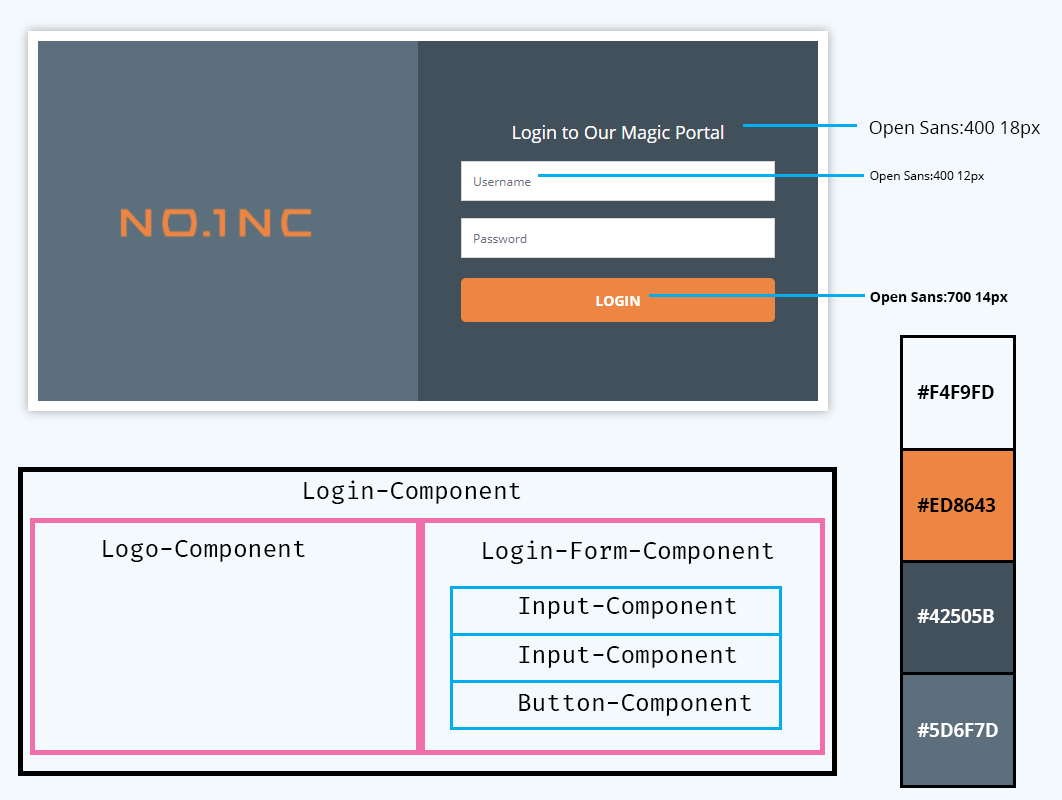
<style>
.page{position:relative;width:1062px;height:800px;background:#f4f9fd}
.page>*{position:absolute;margin:0}
.t1{font:18px "OpenSans";color:#000000}
.t2{font:12px "OpenSans";color:#000000}
.t3{font:14px "OpenSans-Bold";color:#000000}
.t4{font:18.5px "OpenSans-Bold";color:#000000}
.t5{font:24px "FiraCode-Regular";color:#000000}
.t6{font:18.5px "OpenSans-Bold";color:#ffffff}
</style>
<div class="page">
<p class="t1" style="left:869px;top:121px;width:171px;height:17px">Open Sans:400 18px</p>
<p class="t2" style="left:870px;top:171px;width:114px;height:12px">Open Sans:400 12px</p>
<p class="t3" style="left:870px;top:292px;width:138px;height:13px">Open Sans:700 14px</p>
<p class="t4" style="left:917px;top:385px;width:77px;height:14px">#F4F9FD</p>
<p class="t5" style="left:304px;top:480px;width:217px;height:24px">Login-Component</p>
<p class="t4" style="left:917px;top:498px;width:79px;height:14px">#ED8643</p>
<p class="t5" style="left:103px;top:540px;width:202px;height:22px">Logo-Component</p>
<p class="t5" style="left:483px;top:540px;width:291px;height:24px">Login-Form-Component</p>
<p class="t5" style="left:519px;top:597px;width:218px;height:22px">Input-Component</p>
<p class="t6" style="left:917px;top:609px;width:77px;height:14px">#42505B</p>
<p class="t5" style="left:519px;top:646px;width:218px;height:22px">Input-Component</p>
<p class="t5" style="left:519px;top:694px;width:233px;height:22px">Button-Component</p>
<p class="t6" style="left:917px;top:723px;width:81px;height:14px">#5D6F7D</p>
</div>
